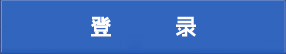
<style>
.page{position:relative;width:286px;height:54px;background:#3265be}
.page>*{position:absolute;margin:0}
.t1{font:22px "MFShangHei_Noncommercial-Bold";color:#fffcfc}
</style>
<div class="page">
<p class="t1" style="left:91px;top:16px;width:105px;height:21px">登           录</p>
</div>
